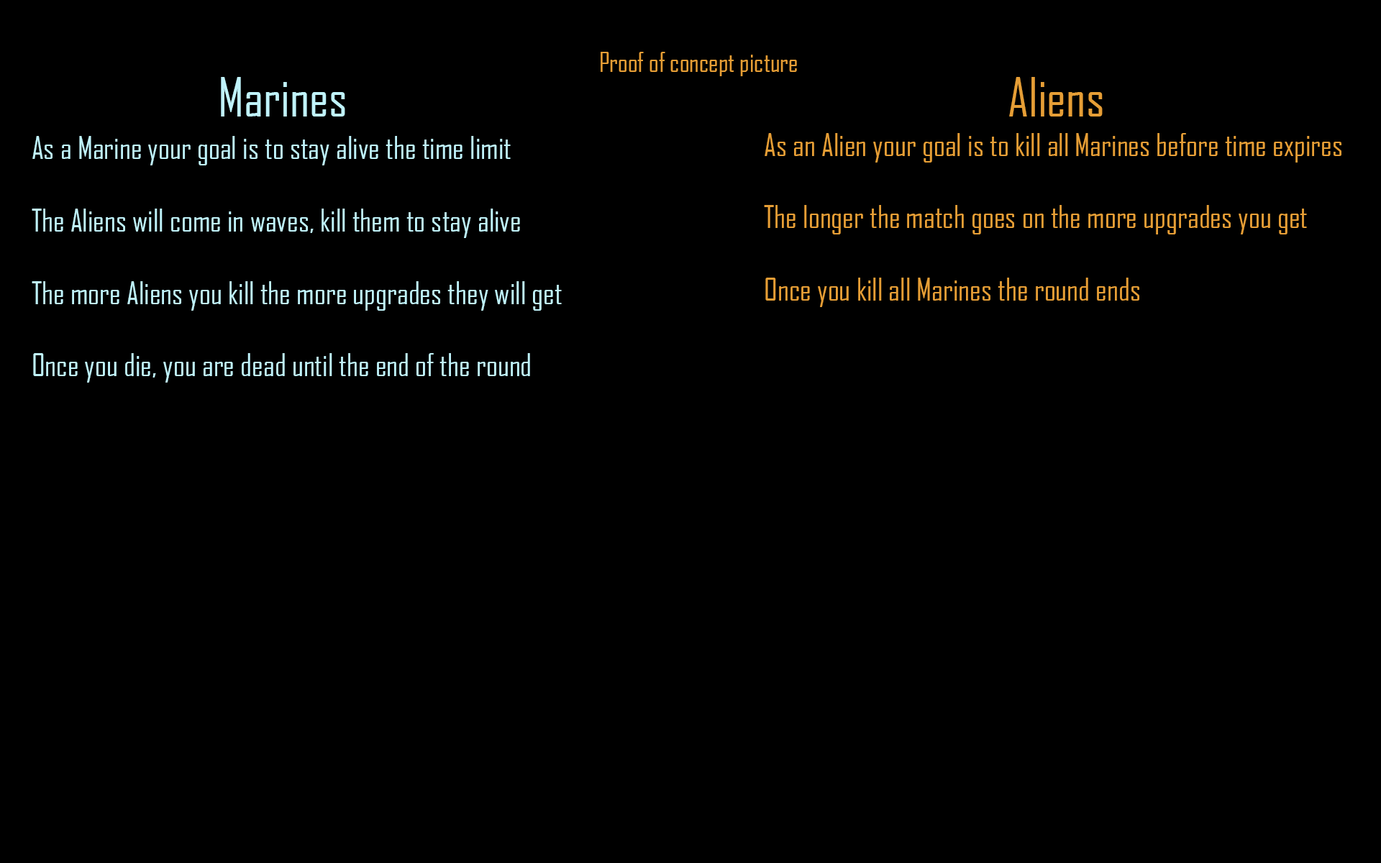
<style>
.page{position:relative;width:1381px;height:863px;background:#000000}
.page>*{position:absolute;margin:0}
.t1{font:25.9px "AgencyFB-Reg";color:#e69e36}
.t2{font:51.8px "AgencyFB-Reg";color:#c0f3fb}
.t3{font:51.8px "AgencyFB-Reg";color:#e69e36}
.t4{font:30.2px "AgencyFB-Reg";color:#c0f3fb}
.t5{font:30.2px "AgencyFB-Reg";color:#e69e36}
</style>
<div class="page">
<p class="t1" style="left:601px;top:52px;width:196px;height:24px">Proof of concept picture</p>
<p class="t2" style="left:221px;top:77px;width:124px;height:40px">Marines</p>
<p class="t3" style="left:1009px;top:77px;width:94px;height:40px">Aliens</p>
<p class="t4" style="left:32px;top:136px;width:530px;height:247px">As a Marine your goal is to stay alive the time limit<br><br>The Aliens will come in waves, kill them to stay alive<br><br>The more Aliens you kill the more upgrades they will get<br><br>Once you die, you are dead until the end of the round</p>
<p class="t5" style="left:764px;top:133px;width:578px;height:174px">As an Alien your goal is to kill all Marines before time expires<br><br>The longer the match goes on the more upgrades you get<br><br>Once you kill all Marines the round ends</p>
</div>
